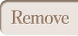
<style>
.page{position:relative;width:78px;height:36px;background:#ebe3dd}
.page>*{position:absolute;margin:0}
.t1{font:18px "RyuminPro-ExBold";letter-spacing:-0.08em;color:#987b66}
</style>
<div class="page">
<p class="t1" style="left:11px;top:10px;width:58px;height:14px">Remove</p>
</div>
